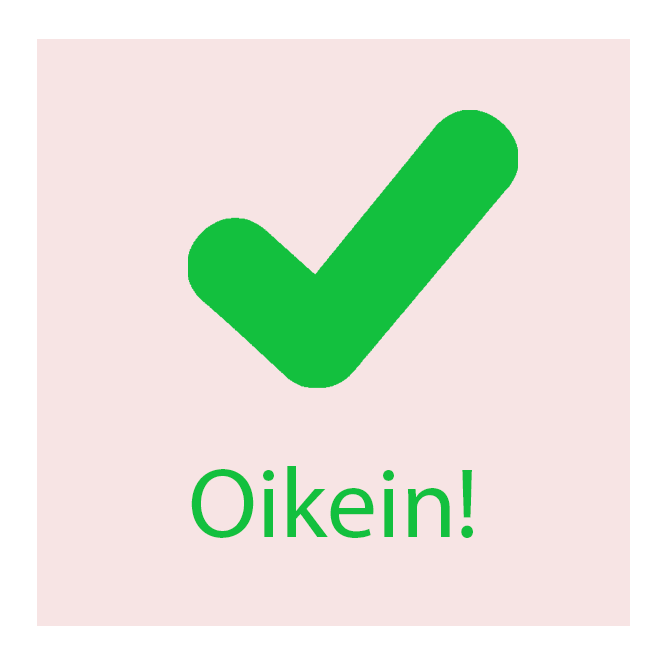
<style>
.page{position:relative;width:666px;height:665px;background:#f7e4e4}
.page>*{position:absolute;margin:0}
.t1{font:100px "MyriadPro-Regular";color:#13c03e}
</style>
<div class="page">
<p class="t1" style="left:191px;top:466px;width:282px;height:72px">Oikein!</p>
</div>
